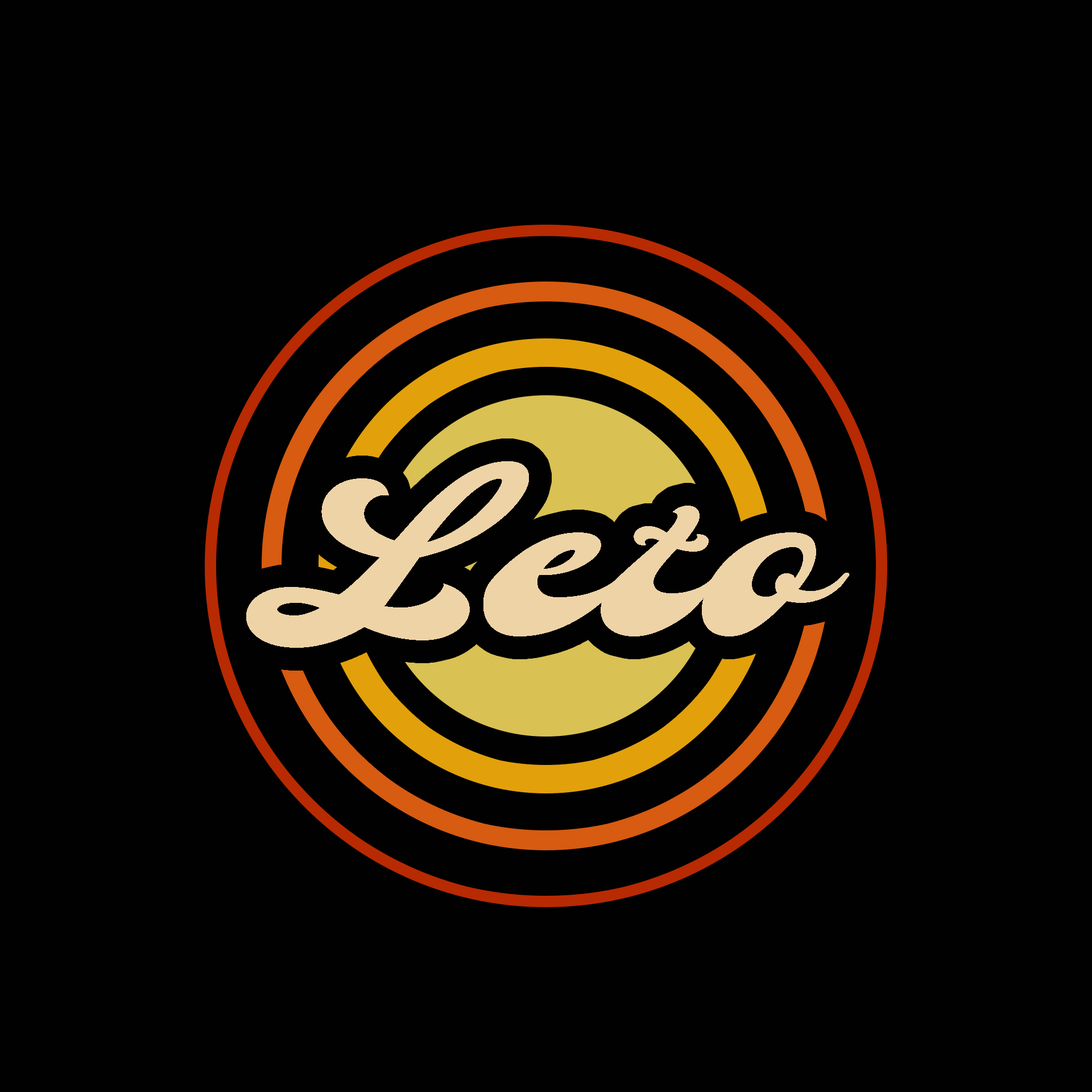
<style>
.page{position:relative;width:1092px;height:1092px;background:#010101}
.page>*{position:absolute;margin:0}
.t1{font:247.6px "BouldsterDEMO-Regular";color:#eed3a6;scale:1.27 1}
</style>
<div class="page">
<p class="t1" style="left:246px;top:461px;width:604px;height:187px">Leto</p>
</div>
